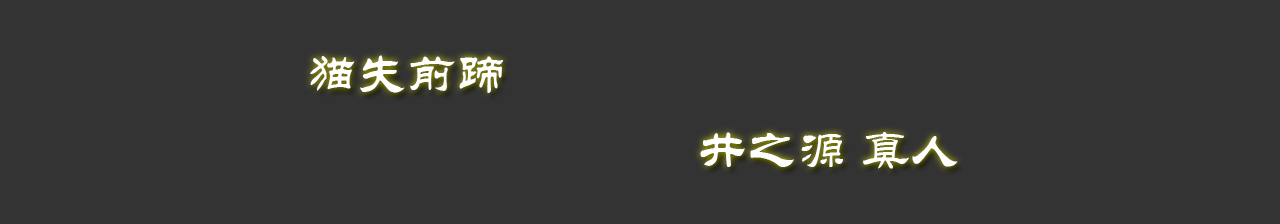
<style>
.page{position:relative;width:1280px;height:224px;background:#333333}
.page>*{position:absolute;margin:0}
.t1{font:50px "STLiti";color:#ffffff}
</style>
<div class="page">
<p class="t1" style="left:310px;top:55px;width:194px;height:38px">猫失前蹄</p>
<p class="t1" style="left:700px;top:132px;width:258px;height:37px">井之源 真人</p>
</div>
